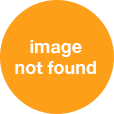
<style>
.page{position:relative;width:114px;height:114px;background:#fd9f18}
.page>*{position:absolute;margin:0}
.t1{font:18px "HelveticaNeue-Bold";color:#ffffff}
</style>
<div class="page">
<p class="t1" style="left:15px;top:40px;width:81px;height:34px;text-align:center">image<br>not found</p>
</div>
